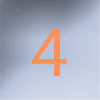
<style>
.page{position:relative;width:100px;height:100px}
.page>*{position:absolute;margin:0}
.t1{font:72px "MyriadPro-Regular";color:#ff8f58}
</style>
<div class="page">
<p class="t1" style="left:32px;top:29px;width:35px;height:47px">4</p>
</div>
